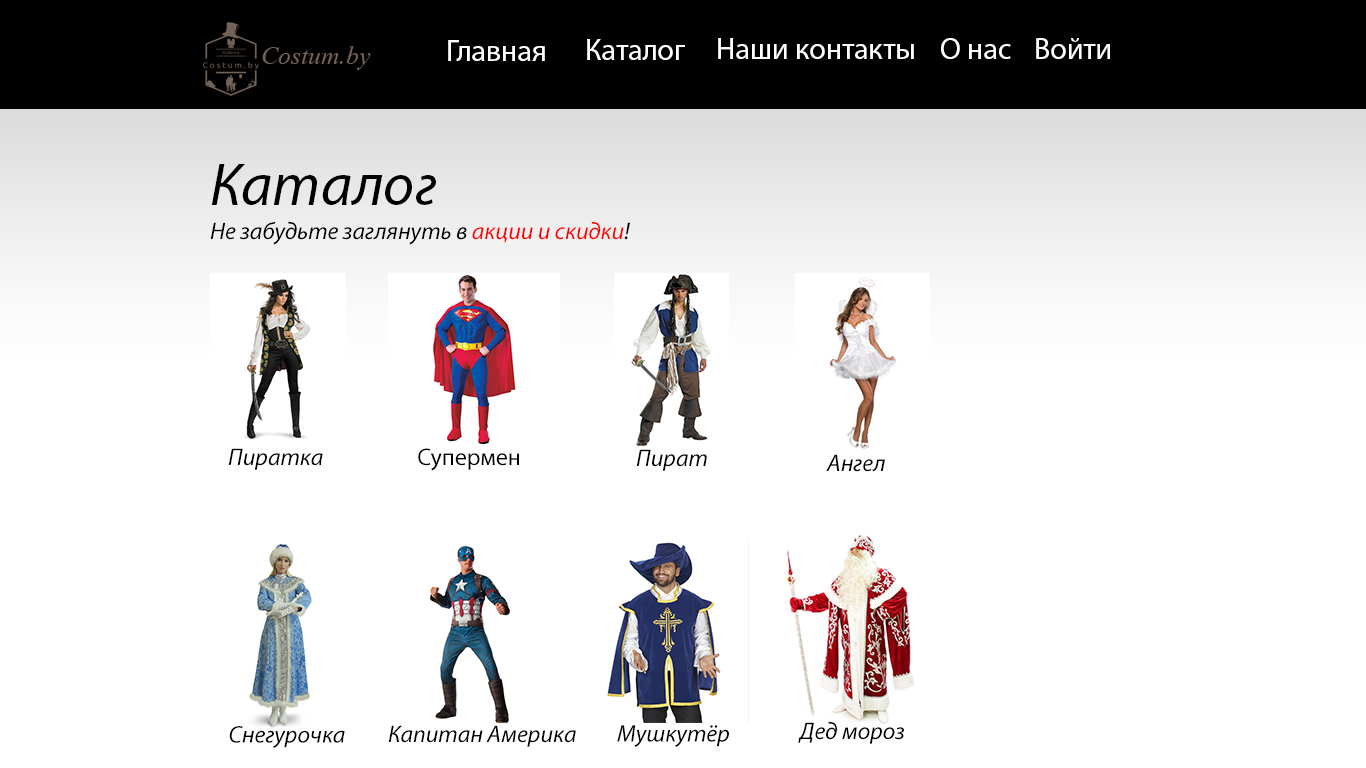
<style>
.page{position:relative;width:1366px;height:768px;background:#ffffff}
.page>*{position:absolute;margin:0}
.t1{font:30px "MyriadPro-Regular";color:#ffffff}
.t2{font:60px "MyriadPro-It";color:#000000}
.t3{font:24px "MyriadPro-It";color:#000000}
.t4{font:24px "MyriadPro-It";color:#ff0101}
.t5{font:24px "MyriadPro-Regular";color:#000000}
</style>
<div class="page">
<p class="t1" style="left:448px;top:40px;width:97px;height:21px">Главная</p>
<p class="t1" style="left:587px;top:39px;width:98px;height:21px">Каталог</p>
<p class="t1" style="left:718px;top:38px;width:196px;height:21px">Наши контакты</p>
<p class="t1" style="left:941px;top:38px;width:70px;height:21px">О нас</p>
<p class="t1" style="left:1036px;top:38px;width:74px;height:21px">Войти</p>
<p class="t2" style="left:211px;top:164px;width:225px;height:41px">Каталог</p>
<p class="t3" style="left:210px;top:221px;width:420px;height:24px">Не забудьте заглянуть в <span class="t4">акции и скидки</span>!</p>
<p class="t3" style="left:228px;top:448px;width:95px;height:22px">Пиратка</p>
<p class="t5" style="left:418px;top:448px;width:101px;height:23px">Супермен</p>
<p class="t3" style="left:636px;top:449px;width:71px;height:22px">Пират</p>
<p class="t3" style="left:826px;top:454px;width:59px;height:18px">Ангел</p>
<p class="t3" style="left:229px;top:726px;width:116px;height:22px">Снегурочка</p>
<p class="t3" style="left:388px;top:725px;width:188px;height:22px">Капитан Америка</p>
<p class="t3" style="left:617px;top:725px;width:112px;height:22px">Мушкутёр</p>
<p class="t3" style="left:798px;top:721px;width:106px;height:23px">Дед мороз</p>
</div>
